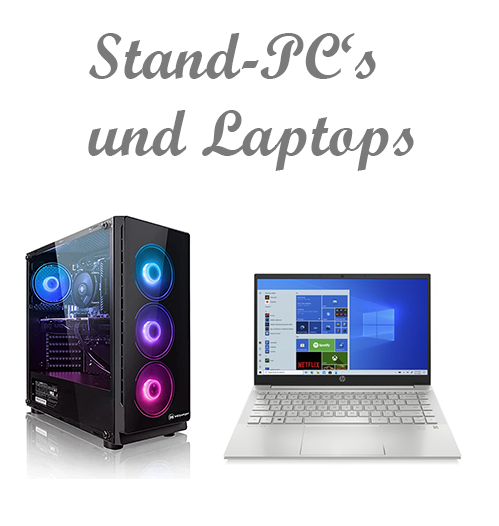
<style>
.page{position:relative;width:499px;height:526px;background:#ffffff}
.page>*{position:absolute;margin:0}
.t1{font:64px "ScriptMTBold";color:#7a7a7a}
</style>
<div class="page">
<p class="t1" style="left:88px;top:33px;width:326px;height:138px">Stand-PC‘s<br>und Laptops</p>
</div>
